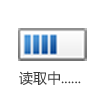
<style>
.page{position:relative;width:100px;height:100px;background:#ffffff}
.page>*{position:absolute;margin:0}
.t1{font:14px "MicrosoftYaHei";color:#3b3b3b;font-variant:small-caps}
</style>
<div class="page">
<p class="t1" style="left:19px;top:71px;width:62px;height:14px">读取中......</p>
</div>
